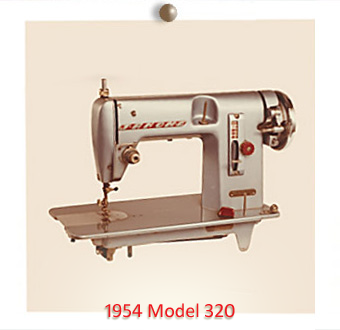
<style>
.page{position:relative;width:340px;height:330px;background:#f2e5d5}
.page>*{position:absolute;margin:0}
.t1{font:20px "Calibri";color:#ef171e}
</style>
<div class="page">
<p class="t1" style="left:105px;top:303px;width:130px;height:15px">1954 Model 320</p>
</div>
